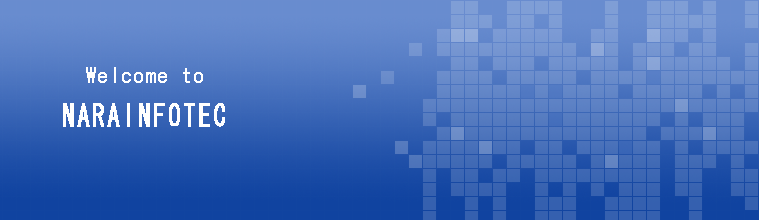
<style>
.page{position:relative;width:759px;height:220px}
.page>*{position:absolute;margin:0}
.t1{font:30px "MS-Gothic";letter-spacing:0.07em;color:#ffffff;font-weight:bold;scale:0.8 1}
.t2{font:20px "MS-Gothic";letter-spacing:0.05em;color:#ffffff;font-weight:bold}
</style>
<div class="page">
<p class="t1" style="left:63px;top:67px;width:162px;height:60px"><span class="t2"><br>  Welcome to<br> <br></span>NARAINFOTEC</p>
</div>
